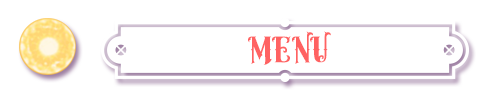
<style>
.page{position:relative;width:484px;height:106px;background:#ffffff}
.page>*{position:absolute;margin:0}
.t1{font:41.7px "Moyers";color:#ff6262}
</style>
<div class="page">
<p class="t1" style="left:248px;top:31px;width:83px;height:34px">MENU</p>
</div>
